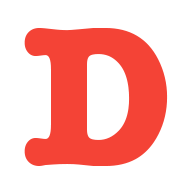
<style>
.page{position:relative;width:192px;height:192px;background:#ffffff}
.page>*{position:absolute;margin:0}
.t1{font:204.2px "AmericanTypewriter-Bold";color:#f44336}
</style>
<div class="page">
<p class="t1" style="left:24px;top:28px;width:144px;height:138px">D</p>
</div>
